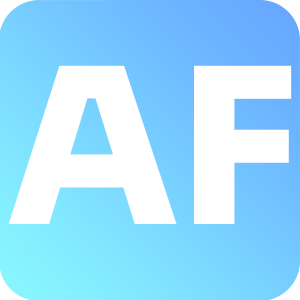
<style>
.page{position:relative;width:300px;height:300px;background:#ffffff}
.page>*{position:absolute;margin:0}
.t1{font:216.7px "Sora-ExtraBold";color:#ffffff}
</style>
<div class="page">
<p class="t1" style="left:8px;top:65px;width:284px;height:159px">AF</p>
</div>
